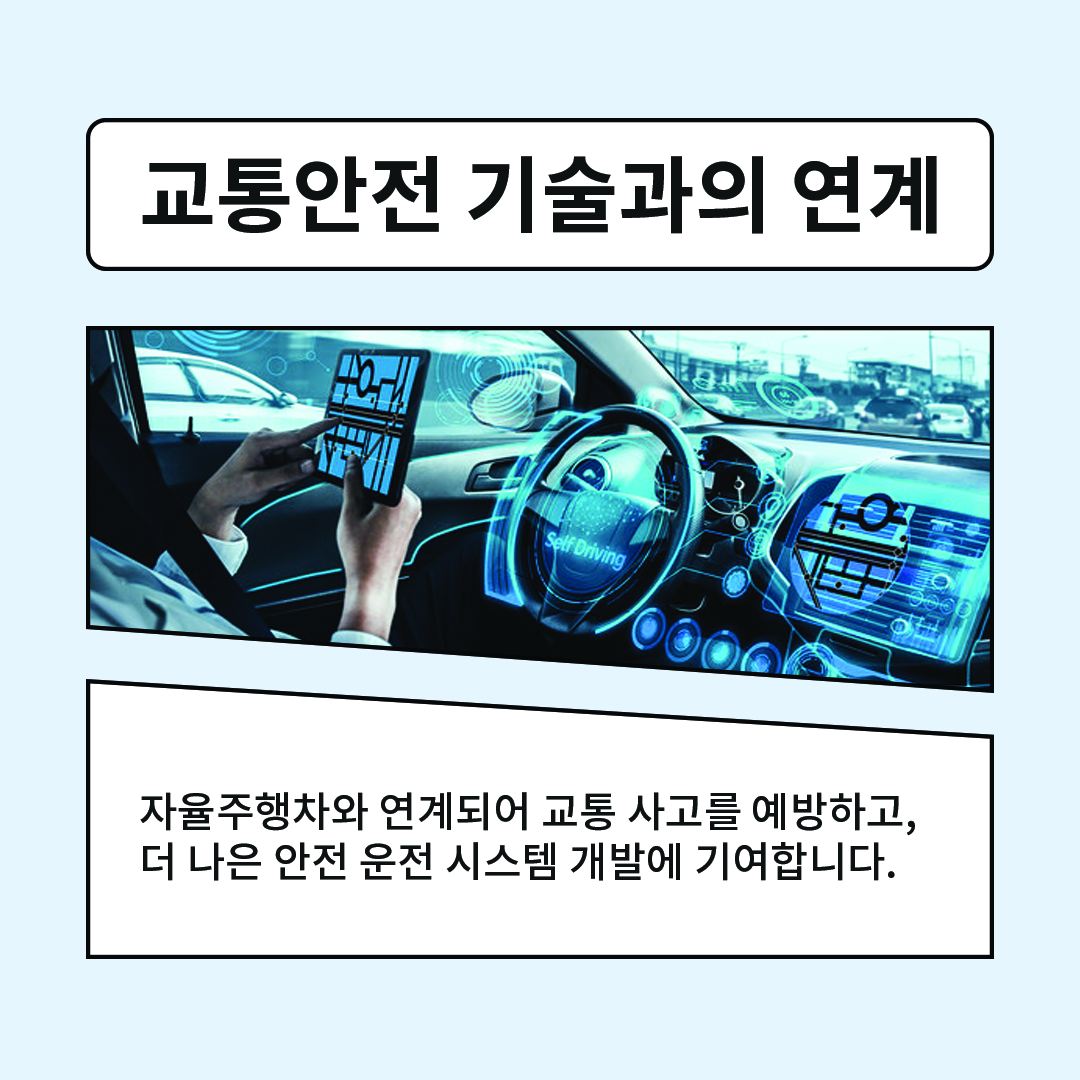
<style>
.page{position:relative;width:1080px;height:1080px;background:#e6f6ff}
.page>*{position:absolute;margin:0}
.t1{font:83.3px "NotoSansCJKkr-Bold";color:#0e1112}
.t2{font:41.7px "NotoSansCJKkr-Medium";color:#0e1112}
</style>
<div class="page">
<p class="t1" style="left:142px;top:156px;width:795px;height:78px">교통안전 기술과의 연계</p>
<p class="t2" style="left:140px;top:792px;width:775px;height:89px">자율주행차와 연계되어 교통 사고를 예방하고, <br>더 나은 안전 운전 시스템 개발에 기여합니다.</p>
</div>
